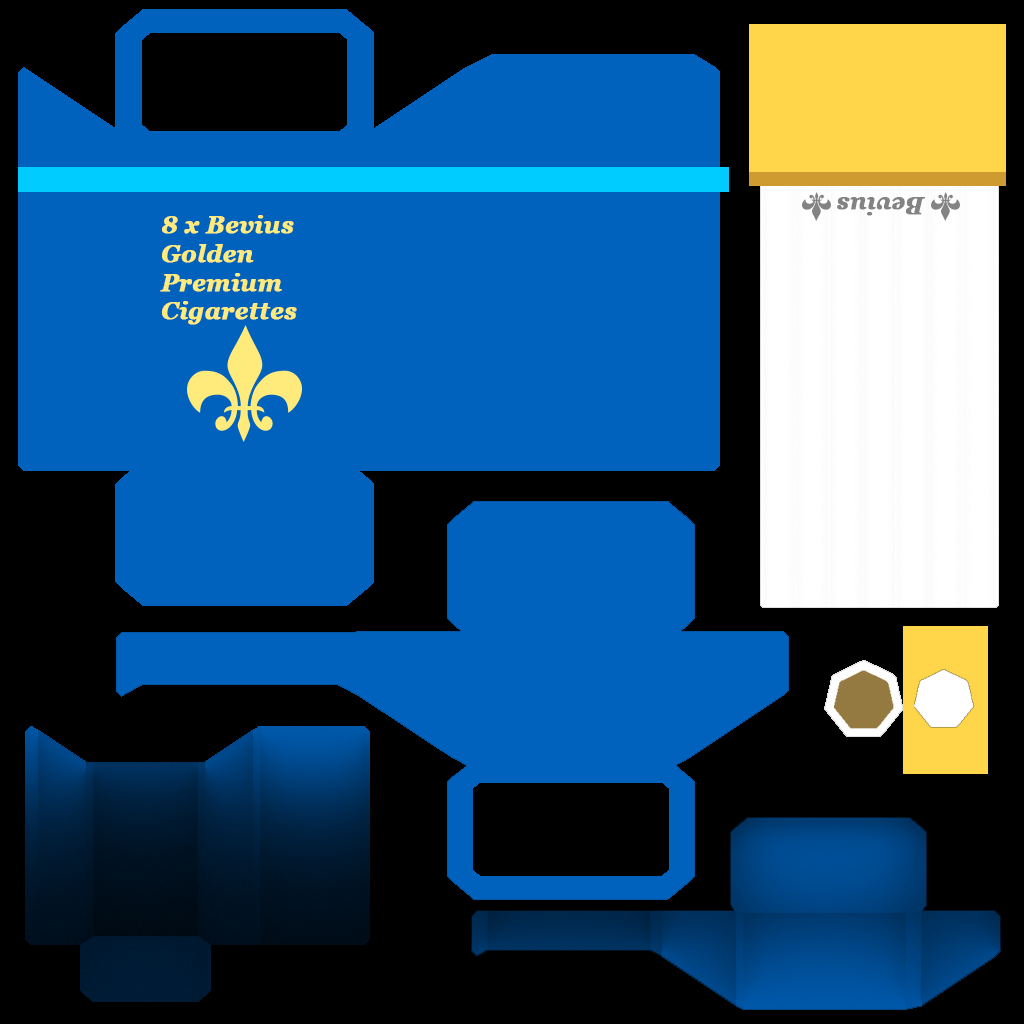
<style>
.page{position:relative;width:1024px;height:1024px;background:#0062bd}
.page>*{position:absolute;margin:0}
.t1{font:24px "Georgia-BoldItalic";color:#838383;font-weight:bold}
.t2{font:24px "Georgia-BoldItalic";color:#ffeb7c;font-weight:bold}
</style>
<div class="page">
<p class="t1" style="left:837px;top:197px;width:88px;height:19px;rotate:180deg">Bevius</p>
<p class="t2" style="left:160px;top:215px;width:137px;height:110px">8 x Bevius<br>Golden<br>Premium<br>Cigarettes</p>
</div>
